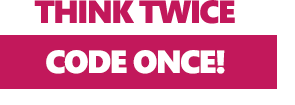
<style>
.page{position:relative;width:295px;height:105px;background:#ffffff}
.page>*{position:absolute;margin:0}
.t1{font:32px "SegoeUIBlack";letter-spacing:-0.05em;color:#c2185b}
.t2{font:32px "SegoeUIBlack";letter-spacing:-0.05em;color:#ffffff}
</style>
<div class="page">
<p class="t1" style="left:34px;top:0px;width:201px;height:24px">THINK TWICE</p>
<p class="t2" style="left:46px;top:50px;width:179px;height:24px">CODE ONCE!</p>
</div>
